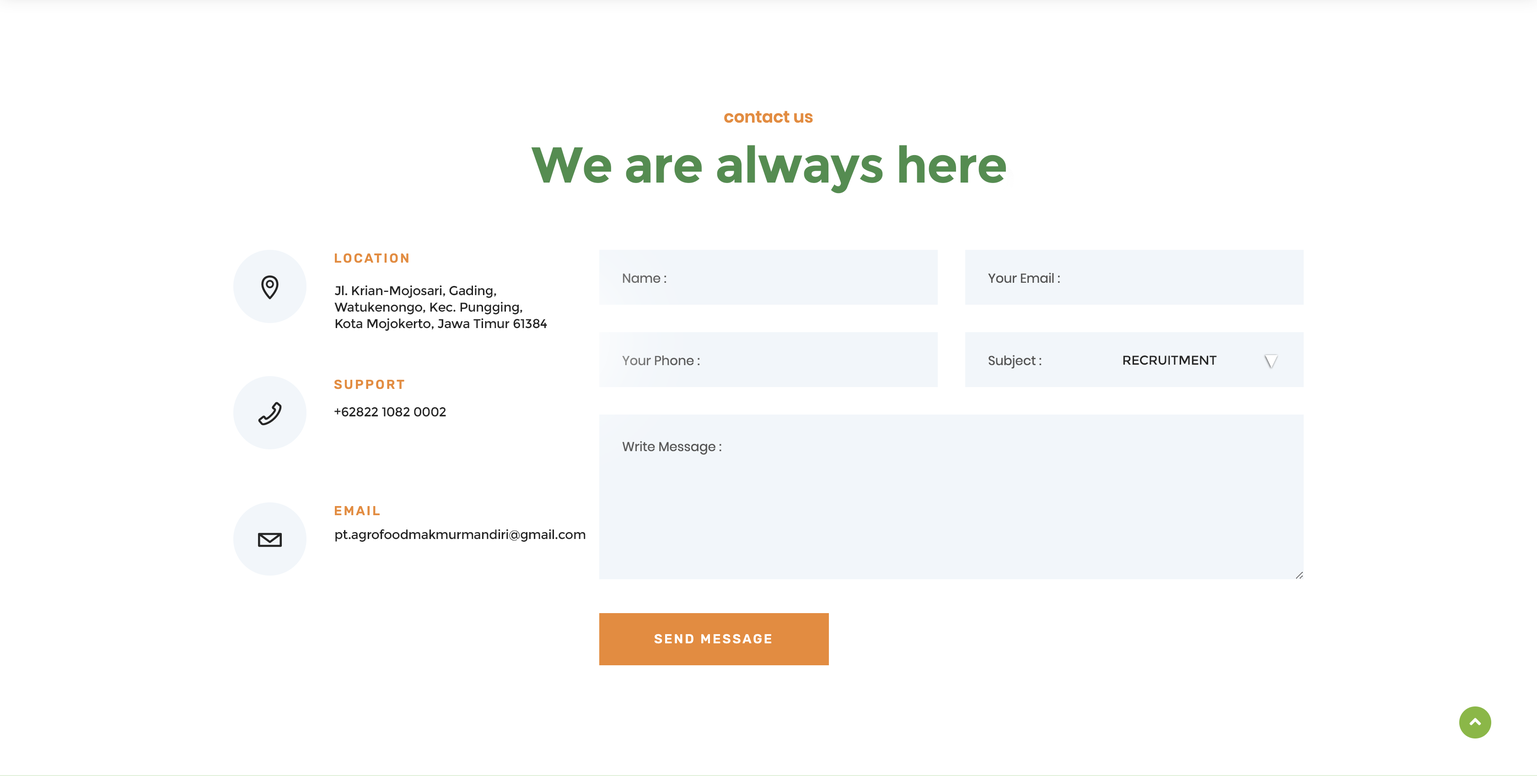
<style>
.page{position:relative;width:1537px;height:776px;background:#ffffff}
.page>*{position:absolute;margin:0}
.t1{font:50.3px "Montserrat-Bold";letter-spacing:-0.02em;color:#558c51}
.t2{font:12.8px/16.5px "Montserrat-Regular";letter-spacing:-0.02em;color:#252525}
.t3{font:12.8px "Montserrat-Regular";letter-spacing:-0.02em;color:#252525}
</style>
<div class="page">
<p class="t1" style="left:531px;top:145px;width:475px;height:48px">We are always here</p>
<p class="t2" style="left:334px;top:285px;width:213px;height:46px">Jl. Krian-Mojosari, Gading,<br>Watukenongo, Kec. Pungging,<br>Kota Mojokerto, Jawa Timur 61384</p>
<p class="t3" style="left:1123px;top:355px;width:94px;height:10px">RECRUITMENT</p>
<p class="t3" style="left:334px;top:407px;width:112px;height:10px">+62822 1082 0002</p>
<p class="t3" style="left:335px;top:529px;width:251px;height:13px">pt.agrofoodmakmurmandiri@gmail.com</p>
</div>
